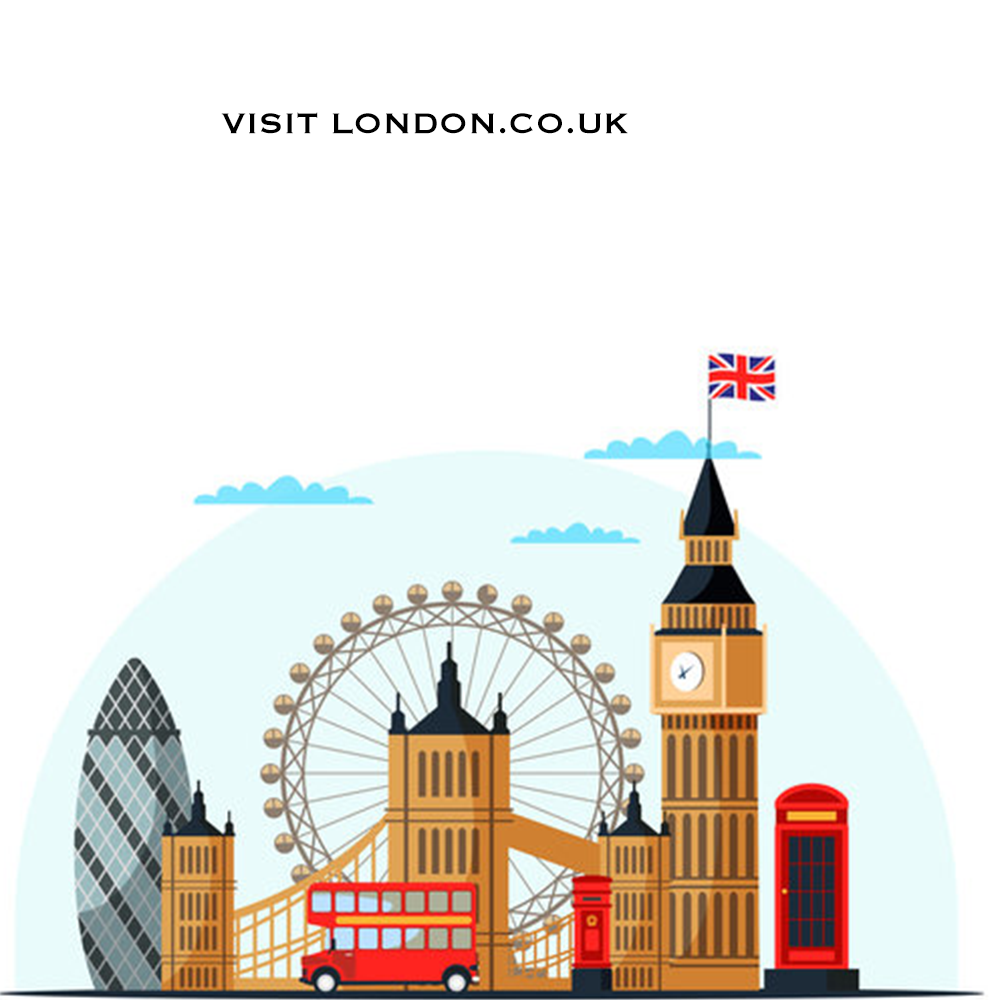
<style>
.page{position:relative;width:1000px;height:1000px;background:#ffffff}
.page>*{position:absolute;margin:0}
.t1{font:37.5px "Copperplate";color:#000000}
</style>
<div class="page">
<p class="t1" style="left:221px;top:112px;width:407px;height:22px">VISIT LONDON.CO.UK</p>
</div>
